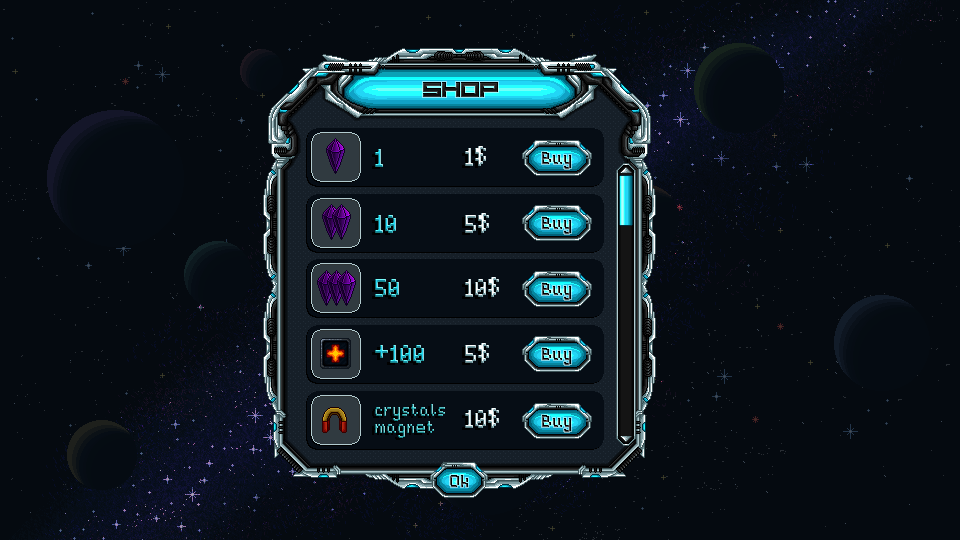
<style>
.page{position:relative;width:960px;height:540px;background:#050a10}
.page>*{position:absolute;margin:0}
.t1{font:20px "Viper"}
.t2{font:20px "untitled-regular"}
.t3{font:14px "untitled-regular"}
</style>
<div class="page">
<p class="t1" style="left:423px;top:82px;width:75px;height:15px">SHOP</p>
<p class="t2" style="left:375px;top:149px;width:8px;height:18px">1</p>
<p class="t2" style="left:465px;top:146px;width:21px;height:20px">1$</p>
<p class="t3" style="left:542px;top:152px;width:29px;height:17px">Buy</p>
<p class="t2" style="left:375px;top:215px;width:21px;height:18px">10</p>
<p class="t2" style="left:465px;top:213px;width:24px;height:20px">5$</p>
<p class="t3" style="left:542px;top:217px;width:29px;height:17px">Buy</p>
<p class="t2" style="left:375px;top:279px;width:24px;height:18px">50</p>
<p class="t2" style="left:465px;top:277px;width:34px;height:20px">10$</p>
<p class="t3" style="left:542px;top:283px;width:29px;height:17px">Buy</p>
<p class="t2" style="left:375px;top:345px;width:49px;height:18px">+100</p>
<p class="t2" style="left:465px;top:343px;width:24px;height:20px">5$</p>
<p class="t3" style="left:542px;top:348px;width:29px;height:17px">Buy</p>
<p class="t3" style="left:375px;top:404px;width:70px;height:34px;text-align:justify">crystals<br>magnet</p>
<p class="t2" style="left:465px;top:408px;width:34px;height:20px">10$</p>
<p class="t3" style="left:542px;top:415px;width:29px;height:17px">Buy</p>
<p class="t3" style="left:450px;top:475px;width:18px;height:12px">Ok</p>
</div>
